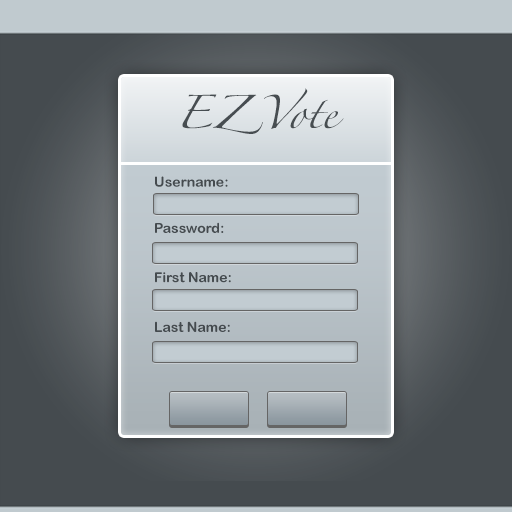
<style>
.page{position:relative;width:512px;height:512px}
.page>*{position:absolute;margin:0}
.t1{font:30px "Zapfino";color:#474d51}
.t2{font:14px "ArialRoundedMTBold";color:#454b4f}
</style>
<div class="page">
<p class="t1" style="left:182px;top:88px;width:162px;height:46px">EZ Vote</p>
<p class="t2" style="left:155px;top:176px;width:73px;height:11px">Username:</p>
<p class="t2" style="left:155px;top:222px;width:69px;height:11px">Password:</p>
<p class="t2" style="left:155px;top:272px;width:76px;height:11px">First Name:</p>
<p class="t2" style="left:155px;top:321px;width:75px;height:11px">Last Name:</p>
</div>
